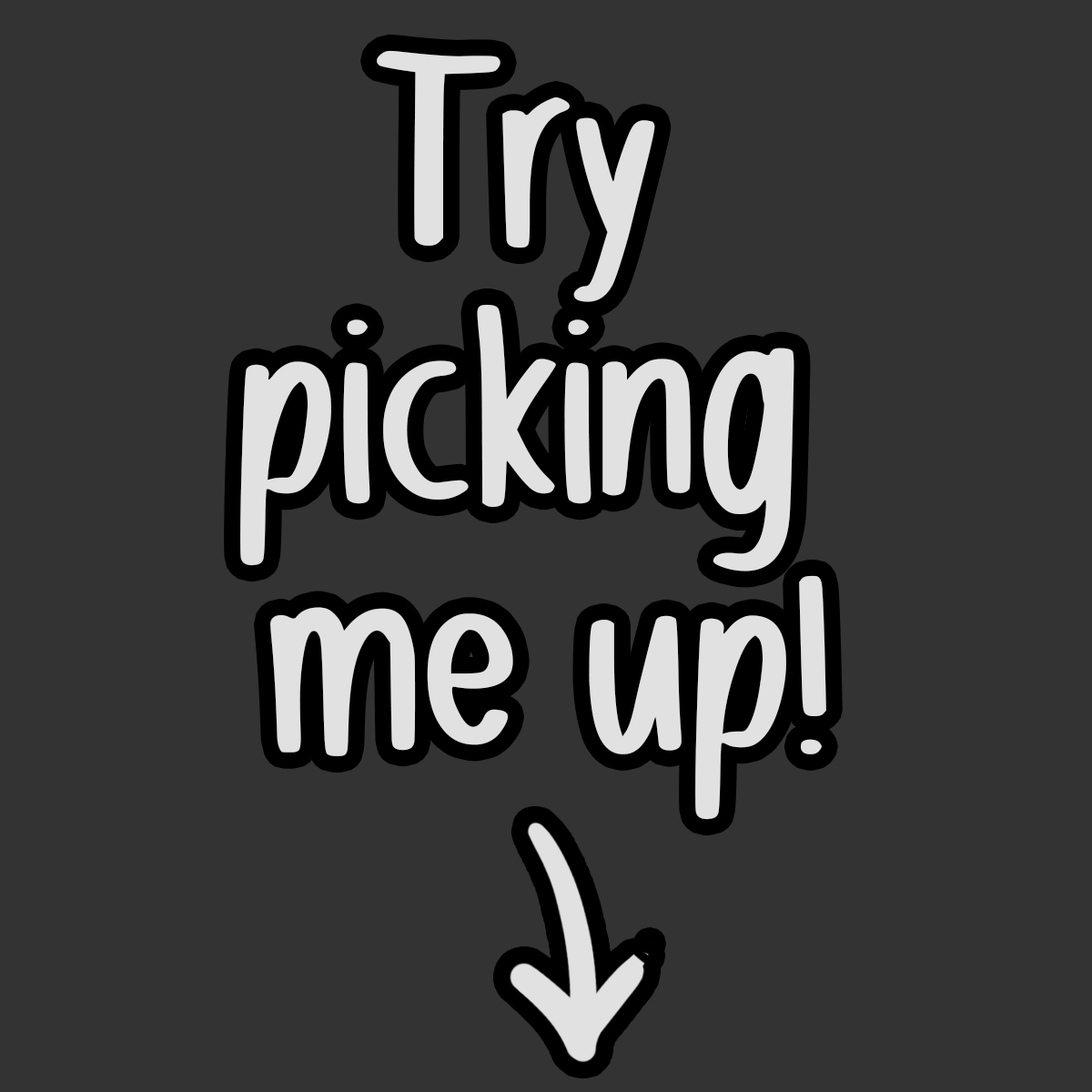
<style>
.page{position:relative;width:1092px;height:1092px;background:#333333}
.page>*{position:absolute;margin:0}
.t1{font:384.4px/254px "JustForFun-Regular";color:#e1e1e1;scale:0.69 1}
</style>
<div class="page">
<p class="t1" style="left:240px;top:50px;width:586px;height:770px;text-align:center">Try <br>picking <br>me up!</p>
</div>
